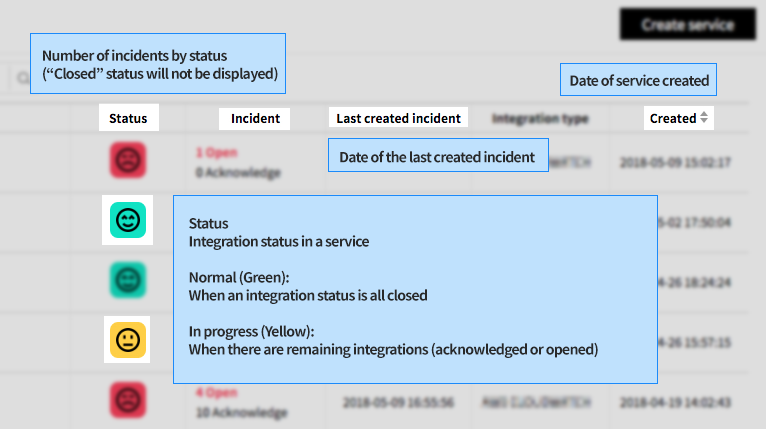
<style>
.page{position:relative;width:766px;height:429px;background:#dedede}
.page>*{position:absolute;margin:0}
.t1{font:14px/18px "NotoSansCJKkr-Bold";letter-spacing:-0.05em;color:#292929}
.t2{font:14px "NotoSansCJKkr-Bold";letter-spacing:-0.05em;color:#292929}
</style>
<div class="page">
<p class="t1" style="left:43px;top:49px;width:235px;height:33px">Number of incidents by status <br>(“Closed” status will not be displayed)</p>
<p class="t2" style="left:570px;top:74px;width:139px;height:12px">Date of service created</p>
<p class="t2" style="left:340px;top:150px;width:195px;height:13px">Date of the last created incident</p>
<p class="t1" style="left:188px;top:218px;width:410px;height:140px">Status<br>Integration status in a service<br><br>Normal (Green): <br>When an integration status is all closed<br><br>In progress (Yellow): <br>When there are remaining integrations (acknowledged or opened)</p>
</div>
